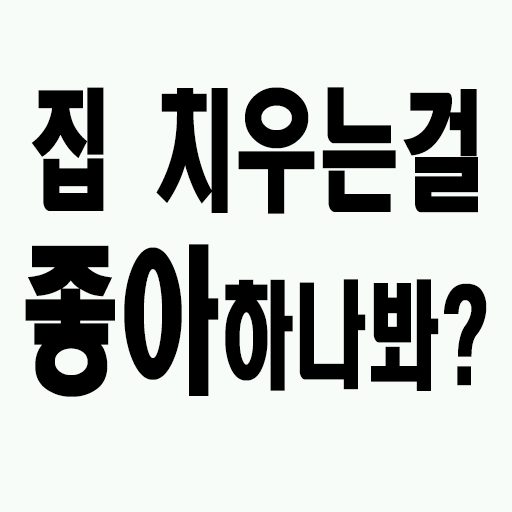
<style>
.page{position:relative;width:512px;height:512px;background:#f8fcf8}
.page>*{position:absolute;margin:0}
.t1{font:131.1px "HeadlineR-HM";color:#000000;scale:0.63 1}
.t2{font:115.9px "HeadlineR-HM";color:#000000;scale:0.63 1}
.t3{font:157.7px "HeadlineR-HM";color:#000000;scale:0.63 1}
</style>
<div class="page">
<p class="t1" style="left:31px;top:87px;width:447px;height:127px">집 치우는걸</p>
<p class="t2" style="left:25px;top:244px;width:462px;height:153px"><span class="t3">좋아</span>하나봐?</p>
</div>
